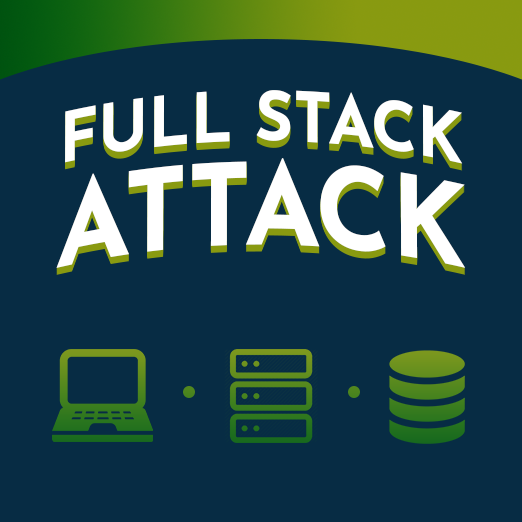
<style>
.page{position:relative;width:522px;height:522px;background:#072c44}
.page>*{position:absolute;margin:0}
.t1{font:70.7px "JosefinSans-Bold";color:#ffffff;scale:0.83 1}
.t2{font:115.6px "JosefinSans-Bold";color:#ffffff;scale:0.83 1}
</style>
<div class="page">
<p class="t1" style="left:56px;top:90px;width:410px;height:178px;text-align:center">FULL STACK<br><span class="t2">ATTACK</span></p>
</div>
